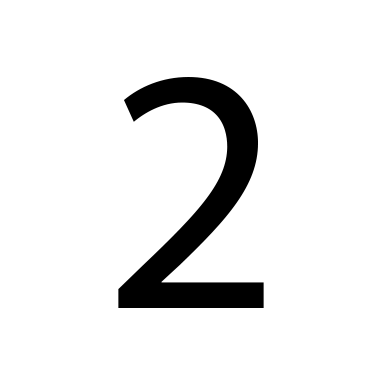
<style>
.page{position:relative;width:384px;height:384px;background:#ffffff}
.page>*{position:absolute;margin:0}
.t1{font:350px "MyriadPro-Regular";color:#000000}
</style>
<div class="page">
<p class="t1" style="left:118px;top:77px;width:146px;height:231px">2</p>
</div>
